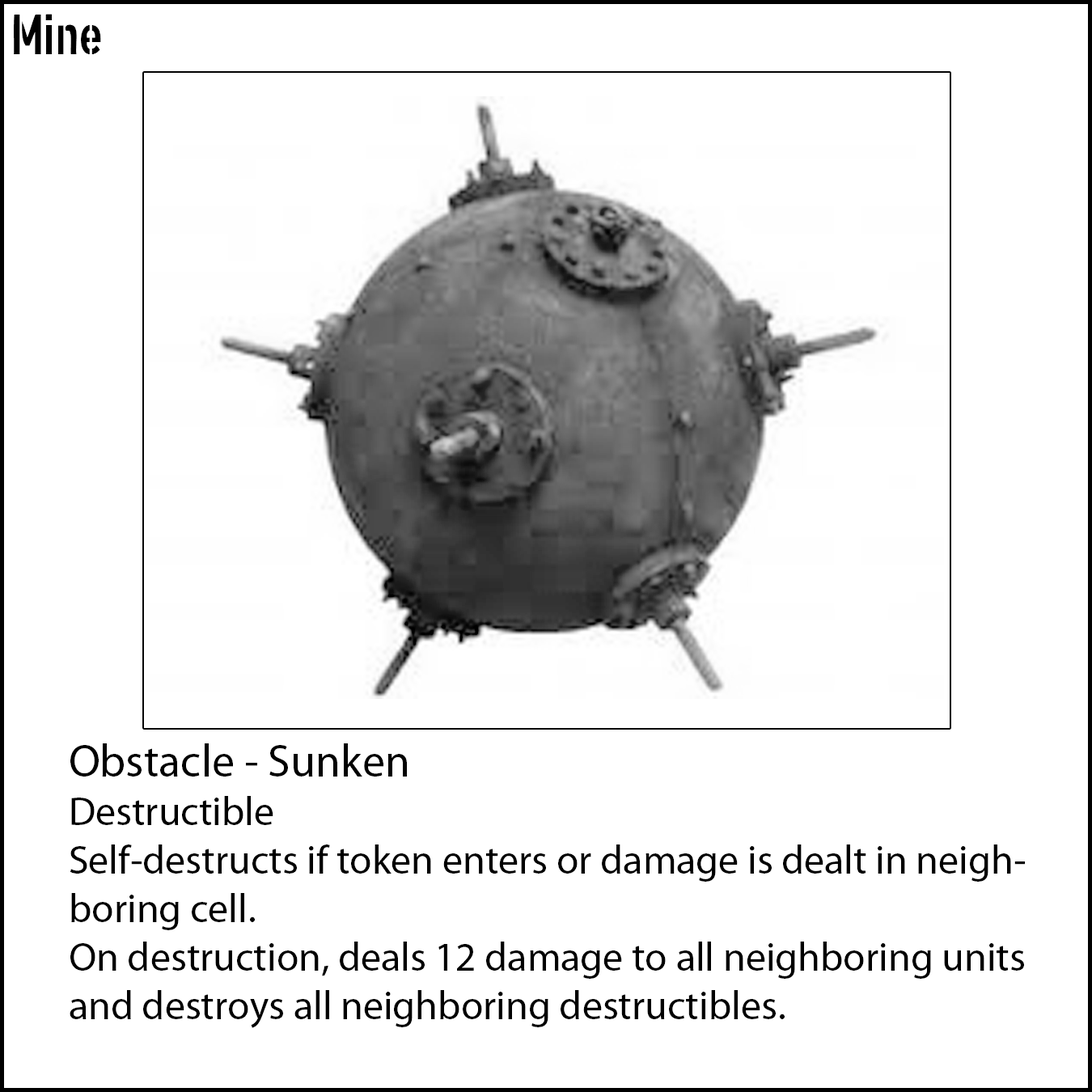
<style>
.page{position:relative;width:1092px;height:1092px;background:#ffffff}
.page>*{position:absolute;margin:0}
.t1{font:55.6px "XXIISTRAIGHT-ARMY";color:#000000}
.t2{font:40.4px "MyriadPro-Regular";color:#000000}
.t3{font:45.5px "MyriadPro-Regular";color:#000000}
</style>
<div class="page">
<p class="t1" style="left:14px;top:14px;width:87px;height:40px">Mine</p>
<p class="t2" style="left:70px;top:743px;width:955px;height:285px"><span class="t3">Obstacle - Sunken<br></span>Destructible<br>Self-destructs if token enters or damage is dealt in neighboring cell.<br>On destruction, deals 12 damage to all neighboring units and destroys all neighboring destructibles.</p>
</div>
